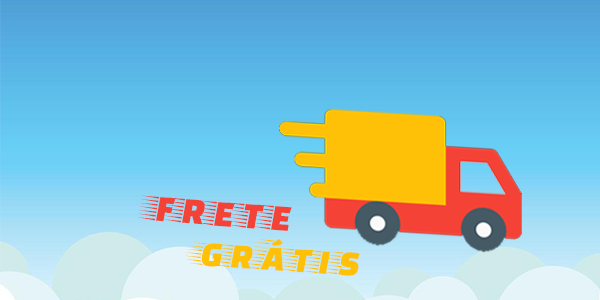
<style>
.page{position:relative;width:600px;height:300px}
.page>*{position:absolute;margin:0}
.t1{font:38.2px "FasterOne-Regular";color:#f44336;scale:1.03 1}
.t2{font:36px "FasterOne-Regular";color:#ffc107;scale:1.05 1}
</style>
<div class="page">
<p class="t1" style="left:138px;top:195px;width:154px;height:36px;rotate:4deg">FRETE</p>
<p class="t2" style="left:185px;top:239px;width:175px;height:37px;rotate:4deg">GRÁTIS</p>
</div>
